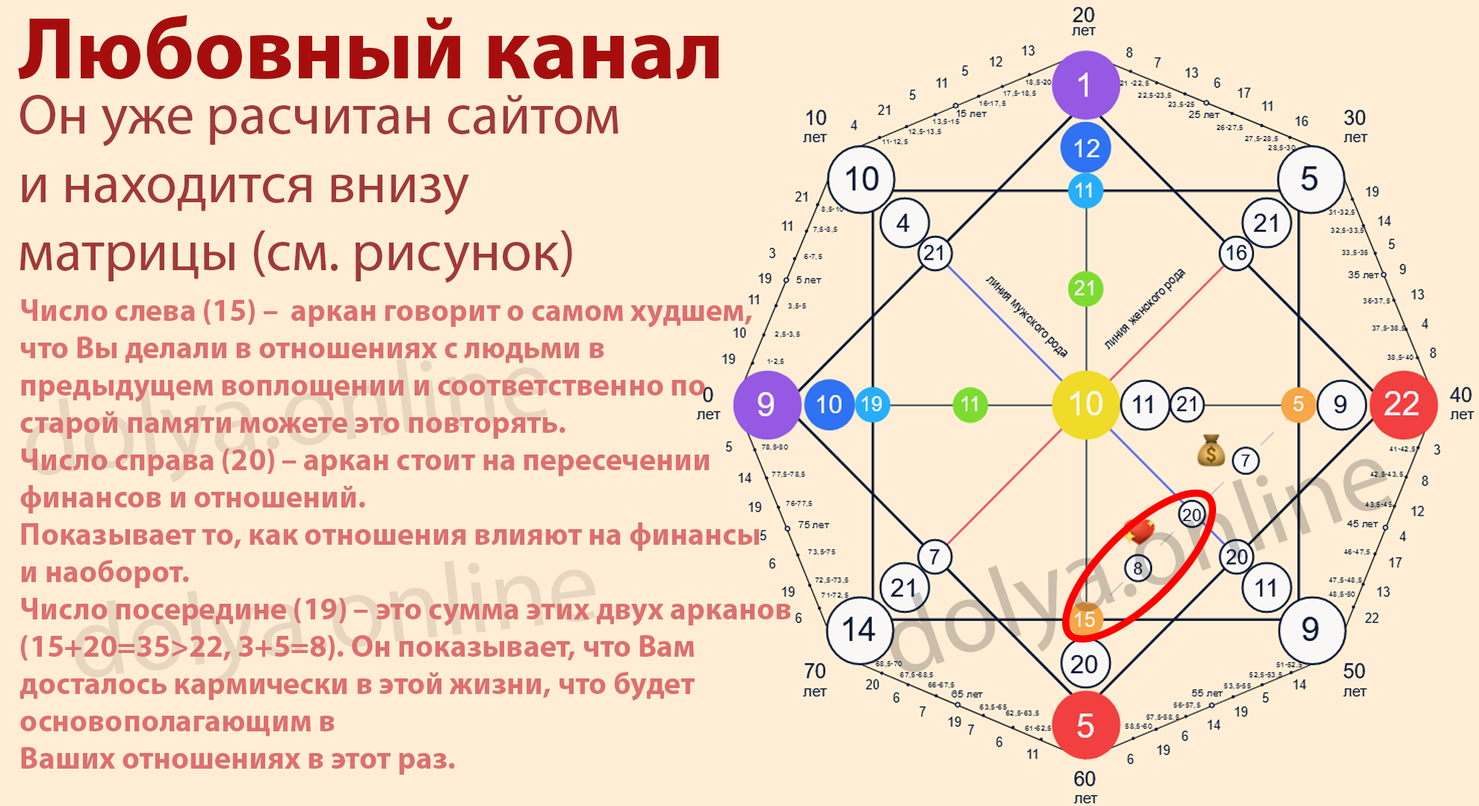
<style>
.page{position:relative;width:1479px;height:806px;background:#ffeed5}
.page>*{position:absolute;margin:0}
.t1{font:88.2px "MyriadPro-Bold";color:#a60e0e}
.t2{font:57px "MyriadPro-Regular";color:#a13939}
.t3{font:31.1px "MyriadPro-Bold";color:#de6f6f}
.t4{font:103.7px "MyriadPro-Regular";color:#e7d7c1}
</style>
<div class="page">
<p class="t1" style="left:18px;top:15px;width:700px;height:65px">Любовный канал</p>
<p class="t2" style="left:20px;top:95px;width:598px;height:188px">Он уже расчитан сайтом <br>и находится внизу<br>матрицы (см. рисунок)</p>
<p class="t3" style="left:20px;top:299px;width:771px;height:476px">Число слева (15) –  аркан говорит о самом худшем, <br>что Вы делали в отношениях с людьми в <br>предыдущем воплощении и соответственно по<br>старой памяти можете это повторять.<br>Число справа (20) – аркан стоит на пересечении <br>финансов и отношений. <br>Показывает то, как отношения влияют на финансы <br>и наоборот.<br>Число посередине (19) – это сумма этих двух арканов <br>(15+20=35&gt;22, 3+5=8). Он показывает, что Вам<br>досталось кармически в этой жизни, что будет <br>основополагающим в<br>Ваших отношениях в этот раз.</p>
<p class="t4" style="left:26px;top:358px;width:522px;height:125px;rotate:-7deg">dolya.online</p>
<p class="t4" style="left:74px;top:561px;width:522px;height:125px;rotate:-7deg">dolya.online</p>
</div>
